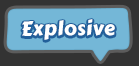
<style>
.page{position:relative;width:139px;height:66px;background:#74b7d7}
.page>*{position:absolute;margin:0}
.t1{font:20px "CarterOne";letter-spacing:0.025em;color:#ffffff}
</style>
<div class="page">
<p class="t1" style="left:22px;top:19px;width:93px;height:21px">Explosive</p>
</div>
